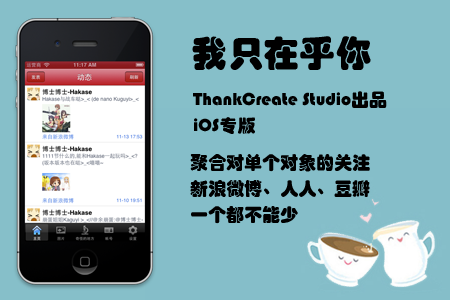
<style>
.page{position:relative;width:450px;height:300px;background:#85bec9}
.page>*{position:absolute;margin:0}
.t1{font:36px "STHupo";color:#000000}
.t2{font:18px/26px "STHupo";color:#000000}
</style>
<div class="page">
<p class="t1" style="left:192px;top:36px;width:179px;height:34px">我只在乎你</p>
<p class="t2" style="left:193px;top:91px;width:194px;height:43px">ThankCreate Studio出品<br>iOS专版</p>
<p class="t2" style="left:190px;top:154px;width:180px;height:70px">聚合对单个对象的关注<br>新浪微博、人人、豆瓣<br>一个都不能少</p>
</div>
